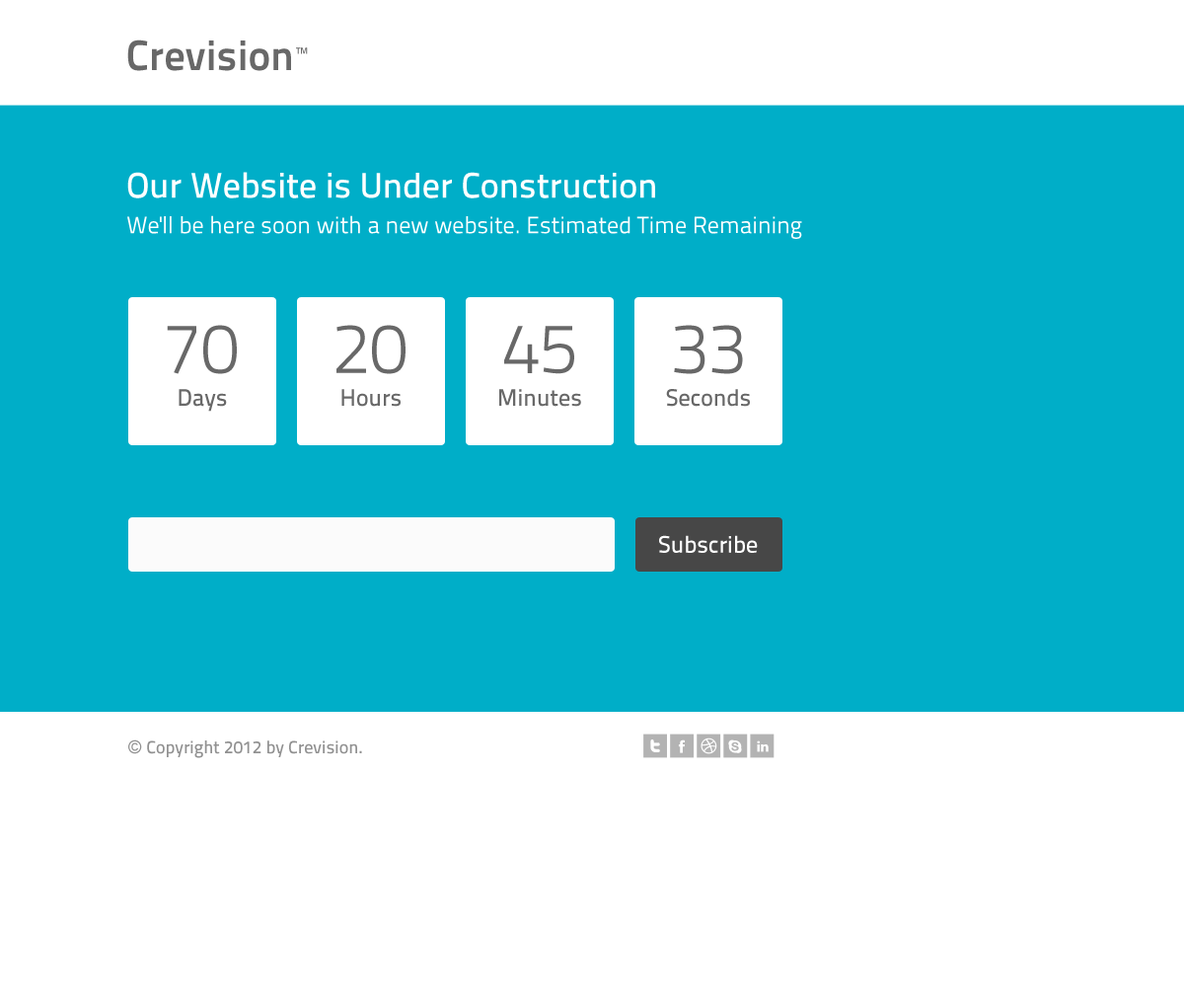
<style>
.page{position:relative;width:1184px;height:1007px;background:#00aec8}
.page>*{position:absolute;margin:0}
.t1{font:23.7px/35.5px "TitilliumText22L-Regular";color:#ffffff}
.t2{font:35.5px/35.5px "TitilliumText22L-Medium";color:#ffffff}
.t3{font:71.1px "TitilliumText22L-Light";color:#686868}
.t4{font:23.7px "TitilliumText22L-Medium";color:#686868}
.t5{font:23.7px "TitilliumText22L-Medium";color:#ffffff}
.t6{font:17.8px "TitilliumText22L-Medium";color:#919191}
.t7{font:17.8px "ArialMT";color:#919191}
</style>
<div class="page">
<p class="t1" style="left:127px;top:172px;width:675px;height:67px"><span class="t2">Our Website is Under Construction<br></span>We'll be here soon with a new website. Estimated Time Remaining</p>
<p class="t3" style="left:167px;top:325px;width:70px;height:49px">70</p>
<p class="t3" style="left:337px;top:325px;width:69px;height:49px">20</p>
<p class="t3" style="left:504px;top:326px;width:70px;height:48px">45</p>
<p class="t3" style="left:674px;top:325px;width:69px;height:49px">33</p>
<p class="t4" style="left:179px;top:389px;width:48px;height:23px">Days</p>
<p class="t4" style="left:342px;top:389px;width:59px;height:18px">Hours</p>
<p class="t4" style="left:499px;top:389px;width:82px;height:18px">Minutes</p>
<p class="t4" style="left:666px;top:389px;width:84px;height:18px">Seconds</p>
<p class="t5" style="left:659px;top:535px;width:99px;height:18px">Subscribe</p>
<p class="t6" style="left:128px;top:739px;width:234px;height:19px"><span class="t7">© </span>Copyright 2012 by Crevision.</p>
</div>
